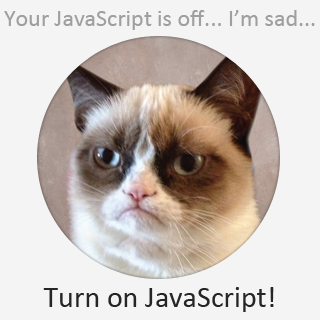
<style>
.page{position:relative;width:320px;height:320px;background:#f4f4f4}
.page>*{position:absolute;margin:0}
.t1{font:24px "Calibri";color:#9f9f9f}
.t2{font:30px "Calibri";color:#252525}
</style>
<div class="page">
<p class="t1" style="left:4px;top:10px;width:311px;height:20px">Your JavaScript is off... I’m sad...</p>
<p class="t2" style="left:43px;top:287px;width:231px;height:25px">Turn on JavaScript!</p>
</div>
